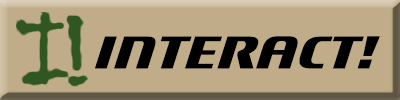
<style>
.page{position:relative;width:400px;height:100px;background:#c0ac88}
.page>*{position:absolute;margin:0}
.t1{font:71.4px "Motorwerk";color:#000000}
</style>
<div class="page">
<p class="t1" style="left:95px;top:36px;width:285px;height:33px">Interact!</p>
</div>
